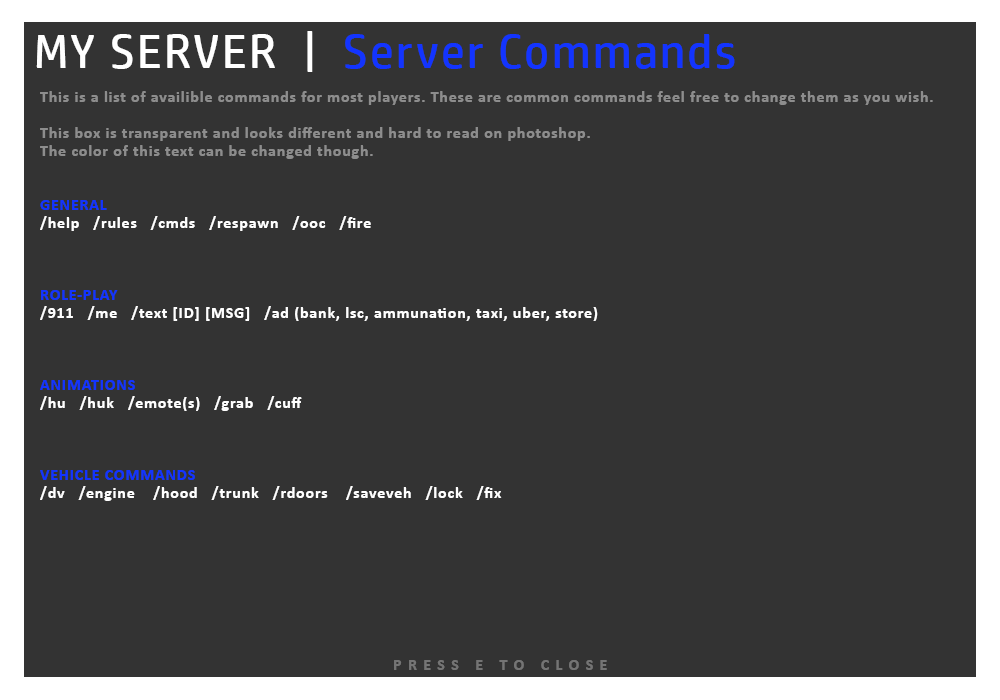
<style>
.page{position:relative;width:1000px;height:700px;background:#333333}
.page>*{position:absolute;margin:0}
.t1{font:48px "HPSimplifiedME-Regular";letter-spacing:0.05em;color:#1334ff}
.t2{font:48px "HPSimplifiedME-Regular";letter-spacing:0.05em;color:#ffffff}
.t3{font:16px/18px "Calibri-Bold";letter-spacing:0.05em;color:#8d8d8d}
.t4{font:16px/18px "Calibri-Bold";letter-spacing:0.05em;color:#1334ff}
.t5{font:16px/18px "Calibri-Bold";letter-spacing:0.05em;color:#ffffff}
.t6{font:16px "Calibri-Bold";letter-spacing:0.4em;color:#747474}
</style>
<div class="page">
<p class="t1" style="left:36px;top:31px;width:699px;height:41px"><span class="t2">MY SERVER  |  </span>Server Commands</p>
<p class="t3" style="left:40px;top:91px;width:893px;height:410px">This is a list of availible commands for most players. These are common commands feel free to change them as you wish.<br><br>This box is transparent and looks different and hard to read on photoshop. <br>The color of this text can be changed though.<br><br><br><span class="t4">GENERAL<br></span><span class="t5">/help   /rules   /cmds   /respawn   /ooc   /fire<br><br><br><br></span><span class="t4">ROLE-PLAY<br></span><span class="t5">/911   /me   /text [ID] [MSG]   /ad (bank, lsc, ammunation, taxi, uber, store)<br><br><br><br></span><span class="t4">ANIMATIONS<br></span><span class="t5">/hu   /huk   /emote(s)   /grab   /cuff<br><br><br><br></span><span class="t4">VEHICLE COMMANDS<br></span><span class="t5">/dv   /engine    /hood   /trunk   /rdoors    /saveveh   /lock   /fix</span></p>
<p class="t6" style="left:394px;top:660px;width:213px;height:10px">PRESS E TO CLOSE</p>
</div>
